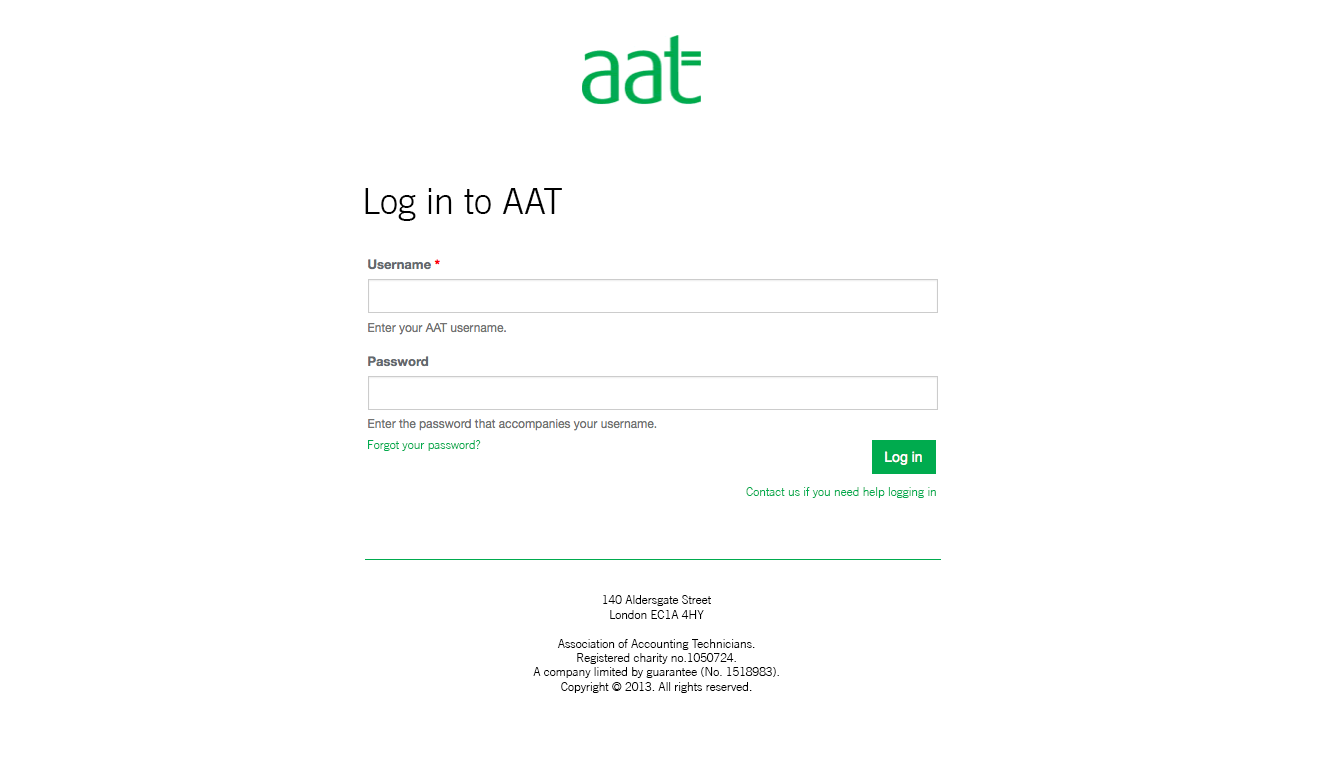
<style>
.page{position:relative;width:1335px;height:758px;background:#ffffff}
.page>*{position:absolute;margin:0}
.t1{font:36px "TradeGothicLT-Light";color:#000000}
.t2{font:12px "TradeGothicLT-Light";color:#00ab4e}
.t3{font:12px "TradeGothicLT-Light";color:#000000}
</style>
<div class="page">
<p class="t1" style="left:365px;top:188px;width:197px;height:33px">Log in to AAT</p>
<p class="t2" style="left:368px;top:440px;width:113px;height:11px">Forgot your password?</p>
<p class="t2" style="left:746px;top:487px;width:190px;height:11px">Contact us if you need help logging in</p>
<p class="t3" style="left:533px;top:595px;width:246px;height:98px;text-align:center">140 Aldersgate Street<br>London EC1A 4HY<br><br>Association of Accounting Technicians.<br>Registered charity no.1050724.<br>A company limited by guarantee (No. 1518983).<br>Copyright © 2013. All rights reserved.</p>
</div>
